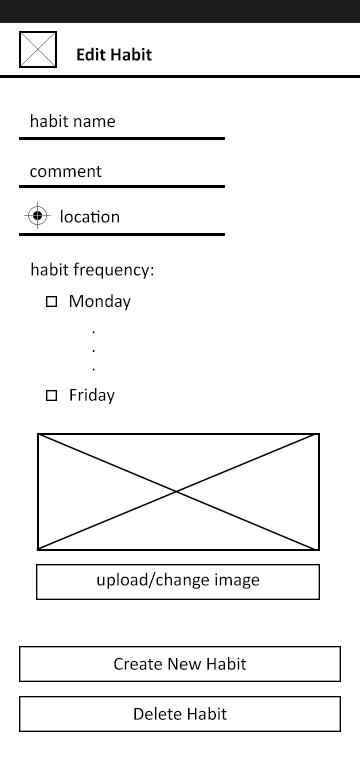
<style>
.page{position:relative;width:360px;height:778px;background:#ffffff}
.page>*{position:absolute;margin:0}
.t1{font:18.9px "Calibri-Bold";color:#000000}
.t2{font:19px "Calibri";color:#000000}
.t3{font:18.7px "Calibri";color:#000000}
.t4{font:18.6px "Calibri";color:#000000}
</style>
<div class="page">
<p class="t1" style="left:77px;top:47px;width:75px;height:14px">Edit Habit</p>
<p class="t2" style="left:31px;top:114px;width:84px;height:14px">habit name</p>
<p class="t2" style="left:30px;top:166px;width:72px;height:12px">comment</p>
<p class="t3" style="left:61px;top:209px;width:58px;height:14px">location</p>
<p class="t2" style="left:31px;top:262px;width:123px;height:17px">habit frequency:</p>
<p class="t2" style="left:70px;top:294px;width:61px;height:17px">Monday</p>
<p class="t3" style="left:92px;top:331px;width:3px;height:40px">...</p>
<p class="t3" style="left:70px;top:388px;width:45px;height:16px">Friday</p>
<p class="t3" style="left:97px;top:572px;width:163px;height:17px">upload/change image</p>
<p class="t4" style="left:114px;top:657px;width:133px;height:13px">Create New Habit</p>
<p class="t4" style="left:134px;top:707px;width:93px;height:13px">Delete Habit</p>
</div>
